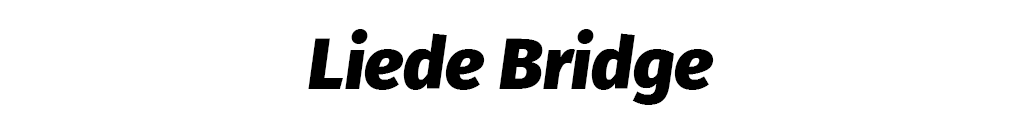
<style>
.page{position:relative;width:1024px;height:128px;background:#ffffff}
.page>*{position:absolute;margin:0}
.t1{font:71.8px "FiraSans-BlackItalic";color:#000000}
</style>
<div class="page">
<p class="t1" style="left:308px;top:29px;width:406px;height:76px">Liede Bridge</p>
</div>
